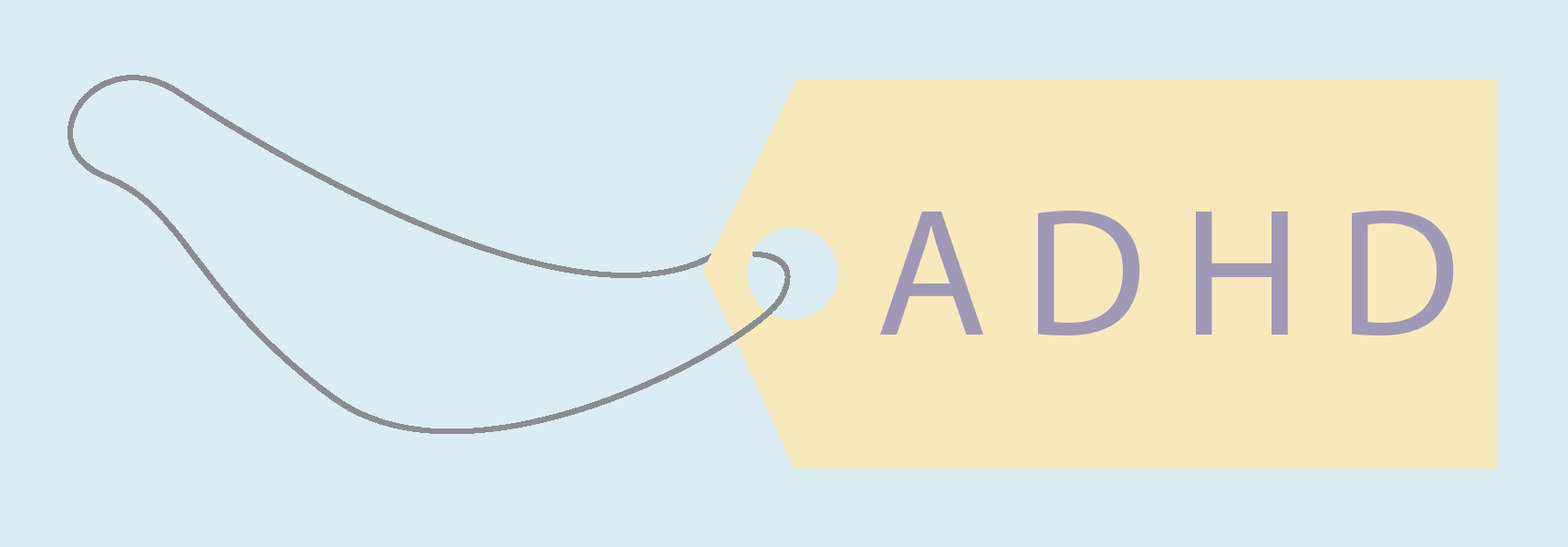
<style>
.page{position:relative;width:1568px;height:547px;background:#daedf3}
.page>*{position:absolute;margin:0}
.t1{font:182.9px "MyriadPro-Regular";letter-spacing:0.2em;color:#9f99b5}
</style>
<div class="page">
<p class="t1" style="left:880px;top:211px;width:574px;height:125px">ADHD</p>
</div>
